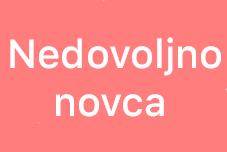
<style>
.page{position:relative;width:227px;height:152px;background:#ff7d7d}
.page>*{position:absolute;margin:0}
.t1{font:40px/48px "SFProText-Medium";color:#ffffff}
</style>
<div class="page">
<p class="t1" style="left:10px;top:37px;width:211px;height:80px;text-align:center">Nedovoljno<br> novca</p>
</div>
